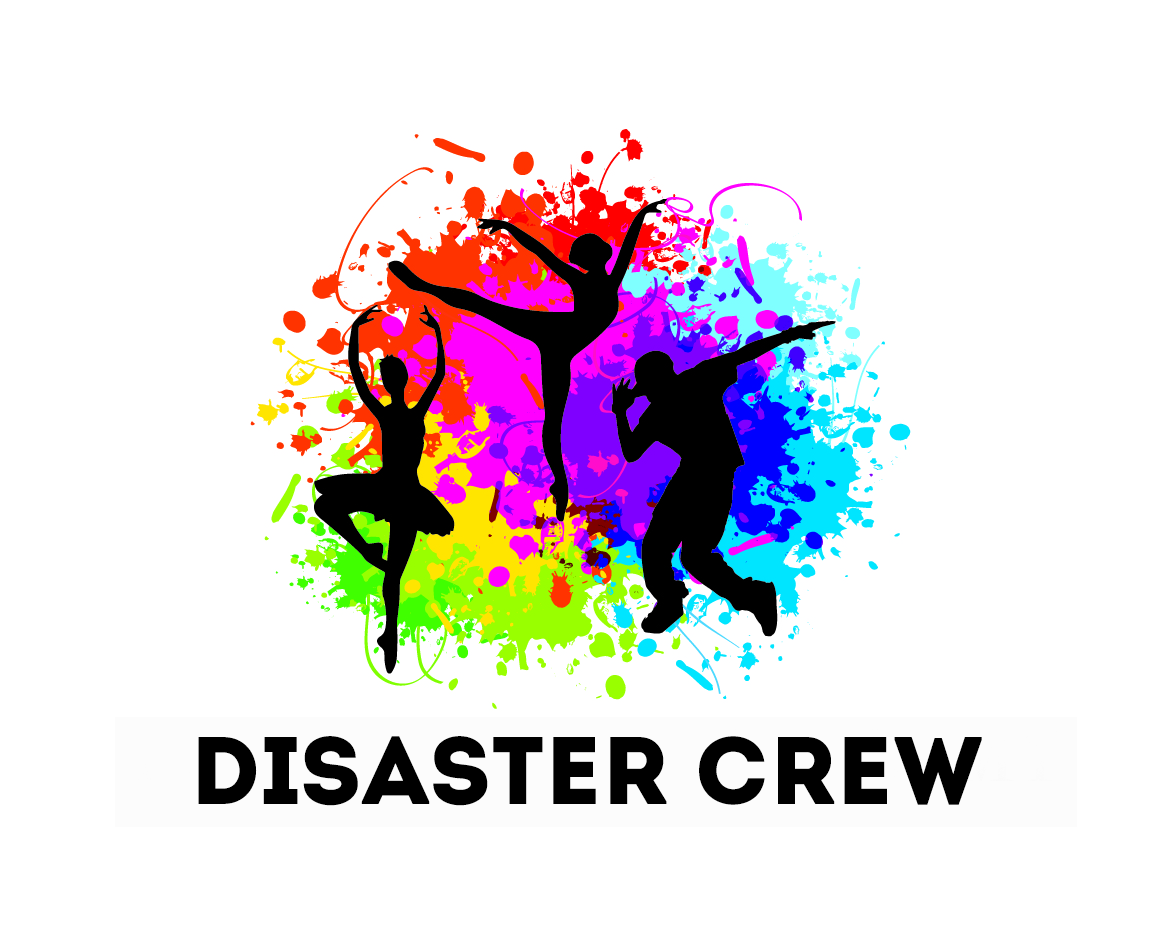
<style>
.page{position:relative;width:1167px;height:945px;background:#ffffff}
.page>*{position:absolute;margin:0}
.t1{font:95.6px "Intro";color:#000000}
</style>
<div class="page">
<p class="t1" style="left:198px;top:736px;width:784px;height:70px">Disaster Crew</p>
</div>
